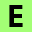
<style>
.page{position:relative;width:32px;height:32px;background:#a3ff75}
.page>*{position:absolute;margin:0}
.t1{font:32px "MyriadPro-Bold";color:#000000}
</style>
<div class="page">
<p class="t1" style="left:9px;top:5px;width:14px;height:22px">E</p>
</div>
